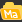
<style>
.page{position:relative;width:22px;height:22px;background:#333333}
.page>*{position:absolute;margin:0}
.t1{font:11px "RTWSYueGoG0v1-Regular";color:#fcfffc}
</style>
<div class="page">
<p class="t1" style="left:4px;top:10px;width:14px;height:8px">Ma</p>
</div>
